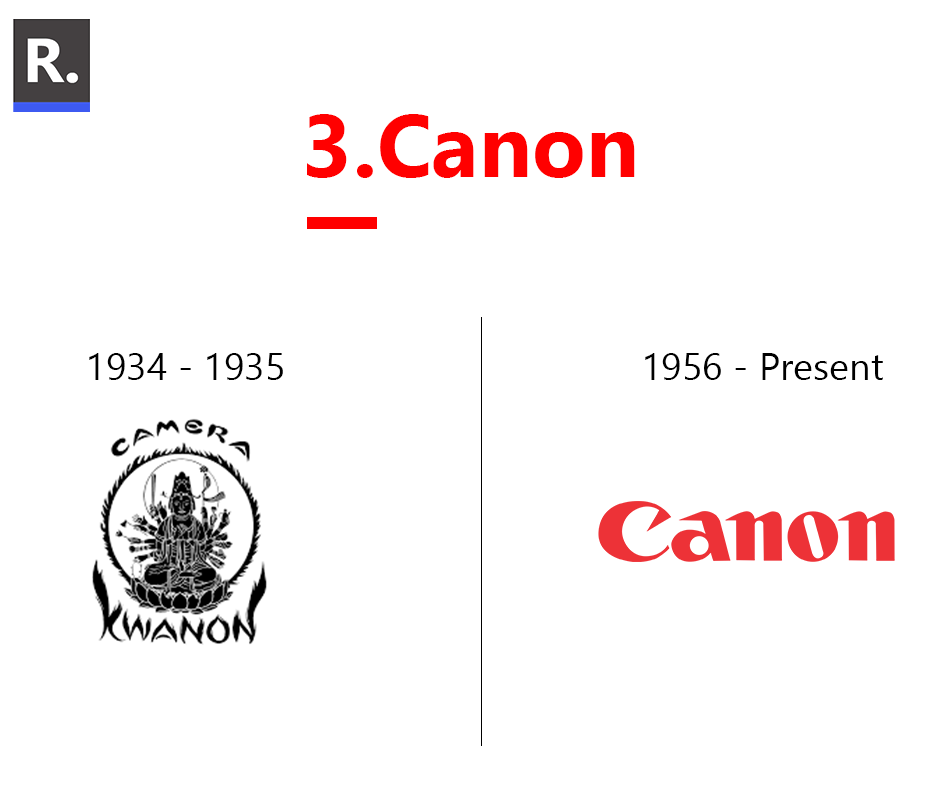
<style>
.page{position:relative;width:940px;height:788px;background:#ffffff}
.page>*{position:absolute;margin:0}
.t1{font:87.8px "SegoeUI-Bold";color:#ff0000}
.t2{font:38px "SegoeUI";color:#000000}
</style>
<div class="page">
<p class="t1" style="left:307px;top:114px;width:328px;height:64px">3.Canon</p>
<p class="t2" style="left:89px;top:353px;width:194px;height:27px">1934 - 1935</p>
<p class="t2" style="left:645px;top:353px;width:238px;height:27px">1956 - Present</p>
</div>
